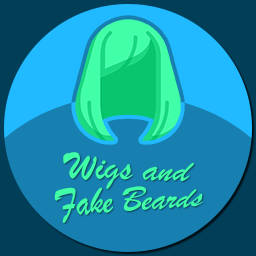
<style>
.page{position:relative;width:256px;height:256px;background:#1780b0}
.page>*{position:absolute;margin:0}
.t1{font:37.3px/31.5px "BrushScriptMT";color:#40ffa7}
</style>
<div class="page">
<p class="t1" style="left:54px;top:152px;width:149px;height:71px;text-align:center">Wigs and<br>Fake Beards</p>
</div>
